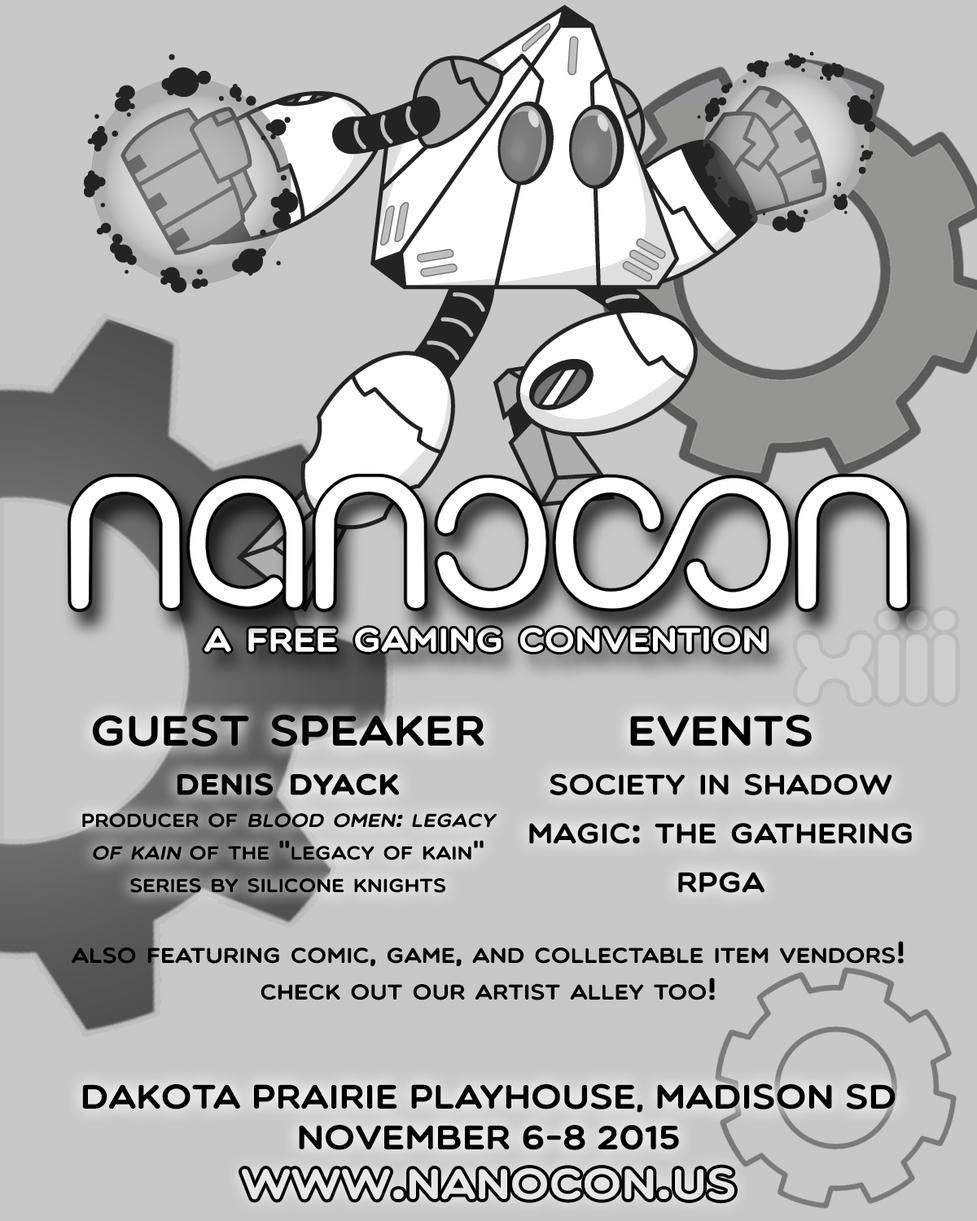
<style>
.page{position:relative;width:977px;height:1221px;background:#c8c8c8}
.page>*{position:absolute;margin:0}
.t1{font:122.1px "gitchgitch";color:#cecece;font-variant:small-caps;font-weight:bold;scale:1.1 1}
.t2{font:47.5px "Multicolore";color:#fefefe;font-variant:small-caps;scale:1.1 1}
.t3{font:27.1px "Multicolore";color:#000000;font-variant:small-caps;scale:1.1 1}
.t4{font:61px "Multicolore";color:#000000;font-variant:small-caps;scale:1.1 1}
.t5{font:40.7px "Multicolore";color:#000000;font-variant:small-caps;font-weight:bold;scale:1.1 1}
.t6{font:27.1px "Multicolore";color:#000000;font-variant:small-caps;font-style:italic;scale:1.1 1}
.t7{font:40.7px "Multicolore";color:#000000;font-variant:small-caps;scale:1.1 1}
.t8{font:30.5px "Multicolore";color:#000000;font-variant:small-caps;scale:1.1 1}
.t9{font:33.9px "Multicolore";color:#000000;font-variant:small-caps;scale:1.1 1}
.t10{font:61px "Multicolore";color:#e7e7e7;font-variant:small-caps;scale:1.1 1}
</style>
<div class="page">
<p class="t1" style="left:797px;top:610px;width:159px;height:93px">XIII</p>
<p class="t2" style="left:204px;top:628px;width:563px;height:24px">a free gaming convention</p>
<p class="t3" style="left:82px;top:714px;width:415px;height:179px;text-align:center"><span class="t4">guest speaker <br></span><span class="t5">denis dyack<br></span>producer of <span class="t6">blood omen: legacy of kain</span> of the "legacy of kain" series by silicone knights</p>
<p class="t7" style="left:529px;top:715px;width:383px;height:178px;text-align:center"><span class="t4">events<br></span>society in shadow<br>magic: the gathering<br>rpga</p>
<p class="t8" style="left:72px;top:941px;width:831px;height:59px;text-align:center">also featuring comic, game, and collectable item vendors!  <br>check out our artist alley too!</p>
<p class="t9" style="left:82px;top:1083px;width:813px;height:67px;text-align:center">DAKOTA PRAIRIE PLAYHOUSE, MADISON SD<br>NOVEMBER 6-8 2015</p>
<p class="t10" style="left:242px;top:1167px;width:492px;height:34px">www.nanocon.us</p>
</div>
